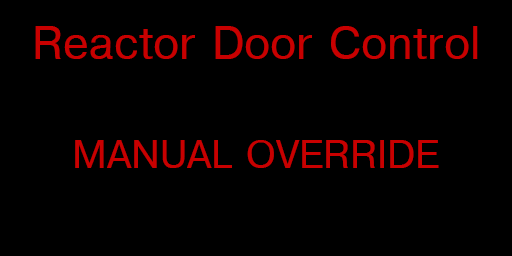
<style>
.page{position:relative;width:512px;height:256px;background:#000000}
.page>*{position:absolute;margin:0}
.t1{font:46px "Helvetica";color:#c80000}
.t2{font:40px "Helvetica";color:#c80000}
</style>
<div class="page">
<p class="t1" style="left:35px;top:26px;width:443px;height:33px">Reactor Door Control</p>
<p class="t2" style="left:75px;top:140px;width:364px;height:28px">MANUAL OVERRIDE</p>
</div>
